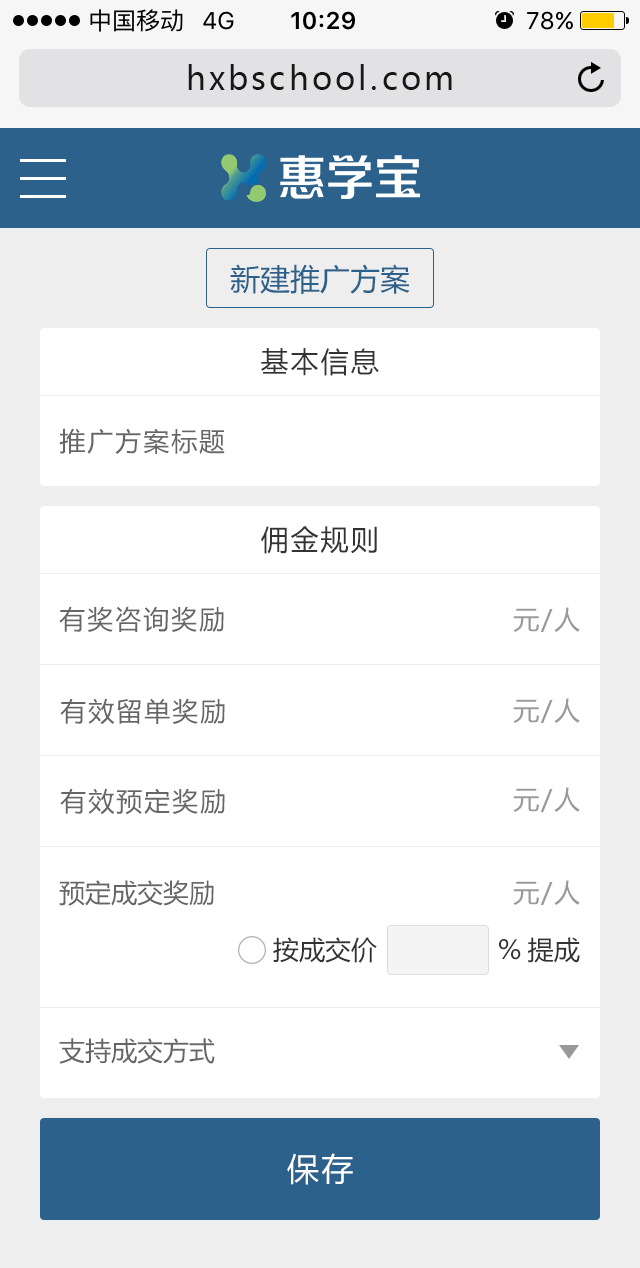
<style>
.page{position:relative;width:640px;height:1268px;background:#ffffff}
.page>*{position:absolute;margin:0}
.t1{font:32px "MicrosoftYaHei";letter-spacing:0.1em;color:#171717}
.t2{font:30px "MicrosoftYaHei";color:#2c618b}
.t3{font:28px "MicrosoftYaHei";letter-spacing:0.075em;color:#333333}
.t4{font:26px "MicrosoftYaHei";letter-spacing:0.075em;color:#666666}
.t5{font:26px "MicrosoftYaHei";letter-spacing:0.075em;color:#999999}
.t6{font:26px "MicrosoftYaHei";color:#666666}
.t7{font:26px "MicrosoftYaHei";color:#333333}
.t8{font:32px "MicrosoftYaHei";letter-spacing:0.075em;color:#ffffff}
</style>
<div class="page">
<p class="t1" style="left:188px;top:64px;width:264px;height:26px">hxbschool.com</p>
<p class="t2" style="left:230px;top:264px;width:180px;height:30px">新建推广方案</p>
<p class="t3" style="left:261px;top:348px;width:118px;height:28px">基本信息</p>
<p class="t4" style="left:59px;top:428px;width:166px;height:27px">推广方案标题</p>
<p class="t3" style="left:261px;top:526px;width:116px;height:28px">佣金规则</p>
<p class="t4" style="left:59px;top:606px;width:165px;height:26px">有奖咨询奖励</p>
<p class="t5" style="left:513px;top:607px;width:67px;height:25px">元/人</p>
<p class="t4" style="left:60px;top:698px;width:165px;height:27px">有效留单奖励</p>
<p class="t5" style="left:513px;top:698px;width:67px;height:25px">元/人</p>
<p class="t4" style="left:60px;top:788px;width:165px;height:27px">有效预定奖励</p>
<p class="t5" style="left:513px;top:787px;width:67px;height:25px">元/人</p>
<p class="t6" style="left:59px;top:880px;width:155px;height:26px">预定成交奖励</p>
<p class="t5" style="left:513px;top:880px;width:67px;height:25px">元/人</p>
<p class="t7" style="left:273px;top:937px;width:104px;height:26px">按成交价</p>
<p class="t7" style="left:499px;top:937px;width:81px;height:26px">%提成</p>
<p class="t6" style="left:59px;top:1038px;width:156px;height:26px">支持成交方式</p>
<p class="t8" style="left:287px;top:1153px;width:66px;height:32px">保存</p>
</div>
